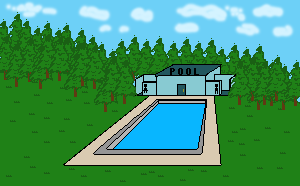
<style>
.page{position:relative;width:300px;height:186px;background:#1f8117}
.page>*{position:absolute;margin:0}
.t1{font:10px "Studio-Manager-Dot-Font-1";letter-spacing:0.19em;color:#000000;font-weight:bold;scale:1.06 1}
</style>
<div class="page">
<p class="t1" style="left:170px;top:68px;width:29px;height:7px">POOL</p>
</div>
